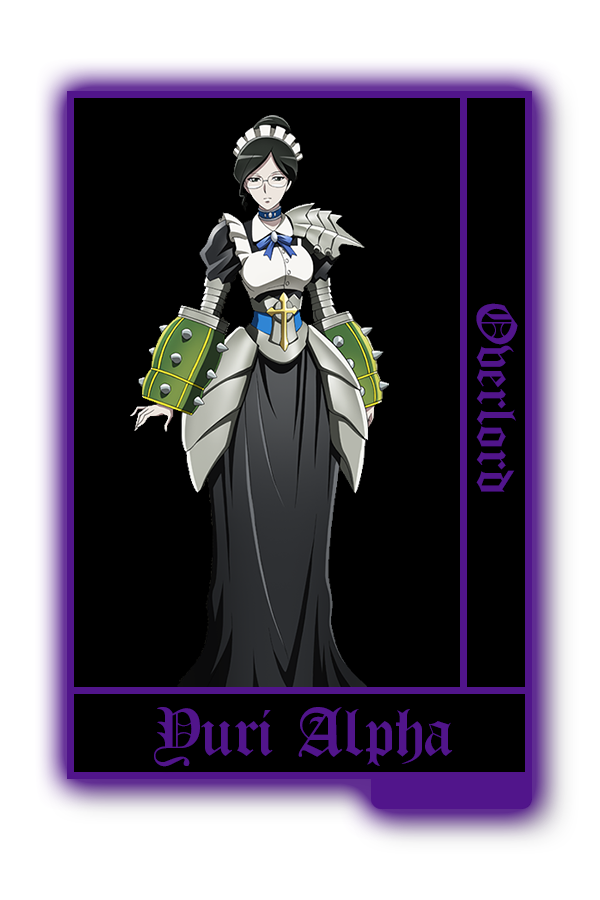
<style>
.page{position:relative;width:600px;height:900px;background:#000000}
.page>*{position:absolute;margin:0}
.t1{font:61.5px "OldLondon";color:#51158b}
.t2{font:75px "OldLondon";color:#51158b}
</style>
<div class="page">
<p class="t1" style="left:476px;top:303px;width:42px;height:189px;rotate:90deg">Overlord</p>
<p class="t2" style="left:154px;top:707px;width:299px;height:60px">Yuri Alpha</p>
</div>
